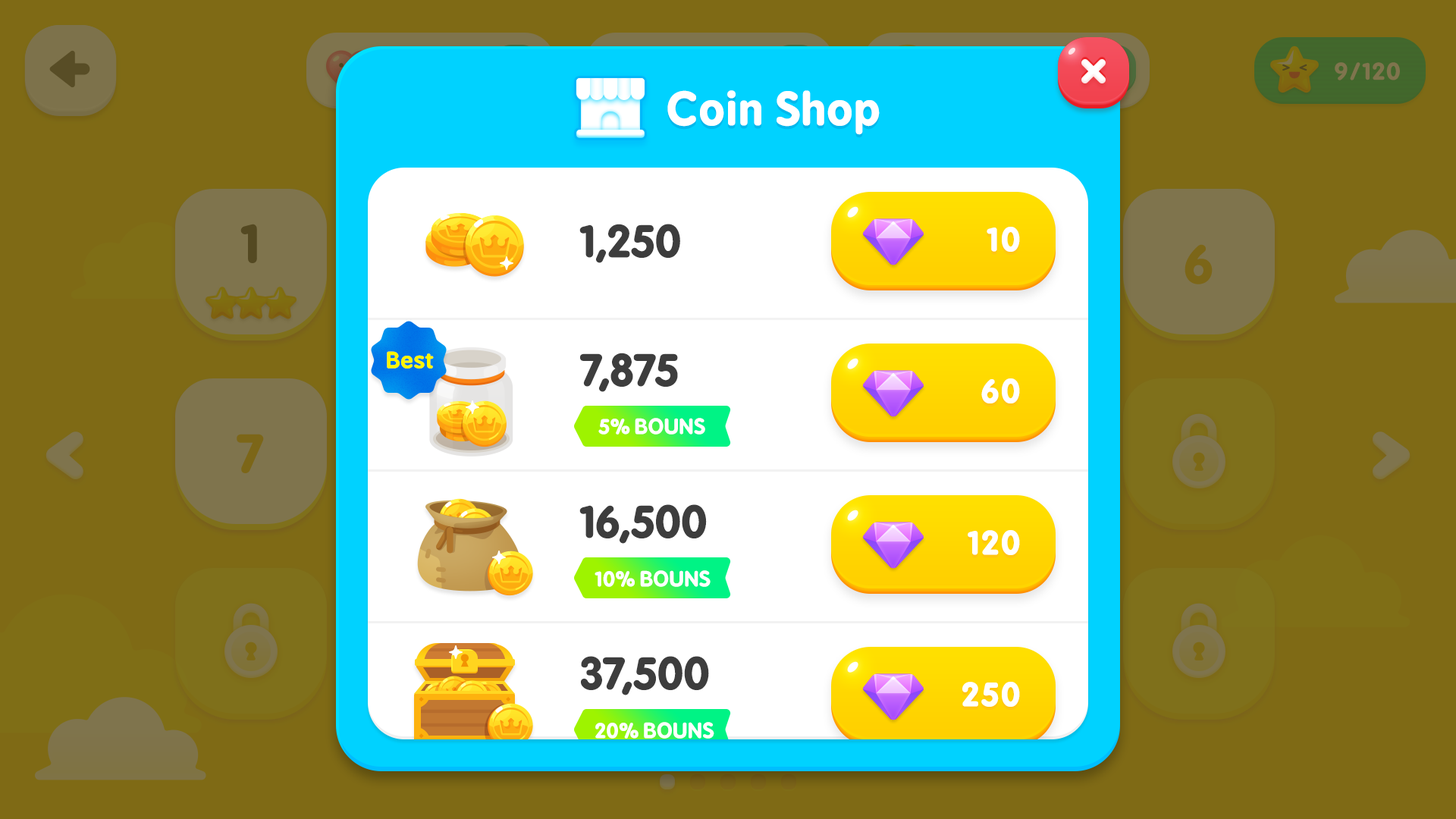
<style>
.page{position:relative;width:1456px;height:819px;background:#7f6a15}
.page>*{position:absolute;margin:0}
.t1{font:43.1px "BPreplay-Bold";color:#ffffff;scale:1.05 1}
.t2{font:43.2px "BPreplay-Bold";letter-spacing:-0.025em;color:#3d3d3d;scale:1.05 1}
.t3{font:31.7px "BPreplay-Bold";color:#ffffff;text-transform:uppercase;font-weight:bold;scale:1.05 1}
.t4{font:21.6px "BPreplay-Bold";color:#fef500;scale:1.05 1}
.t5{font:20.2px "BPreplay-Bold";letter-spacing:-0.025em;color:#ffffff;scale:1.05 1}
</style>
<div class="page">
<p class="t1" style="left:667px;top:90px;width:213px;height:45px">Coin Shop</p>
<p class="t2" style="left:579px;top:224px;width:101px;height:39px">1,250</p>
<p class="t3" style="left:987px;top:227px;width:33px;height:25px">10</p>
<p class="t4" style="left:387px;top:351px;width:47px;height:18px">Best</p>
<p class="t2" style="left:580px;top:353px;width:98px;height:39px">7,875</p>
<p class="t3" style="left:981px;top:378px;width:39px;height:25px">60</p>
<p class="t5" style="left:598px;top:418px;width:107px;height:17px">5% BOUNS</p>
<p class="t2" style="left:579px;top:504px;width:128px;height:40px">16,500</p>
<p class="t3" style="left:968px;top:530px;width:52px;height:25px">120</p>
<p class="t5" style="left:595px;top:570px;width:116px;height:17px">10% BOUNS</p>
<p class="t2" style="left:581px;top:656px;width:128px;height:39px">37,500</p>
<p class="t3" style="left:962px;top:682px;width:58px;height:25px">250</p>
<p class="t5" style="left:595px;top:722px;width:119px;height:17px">20% BOUNS</p>
</div>
